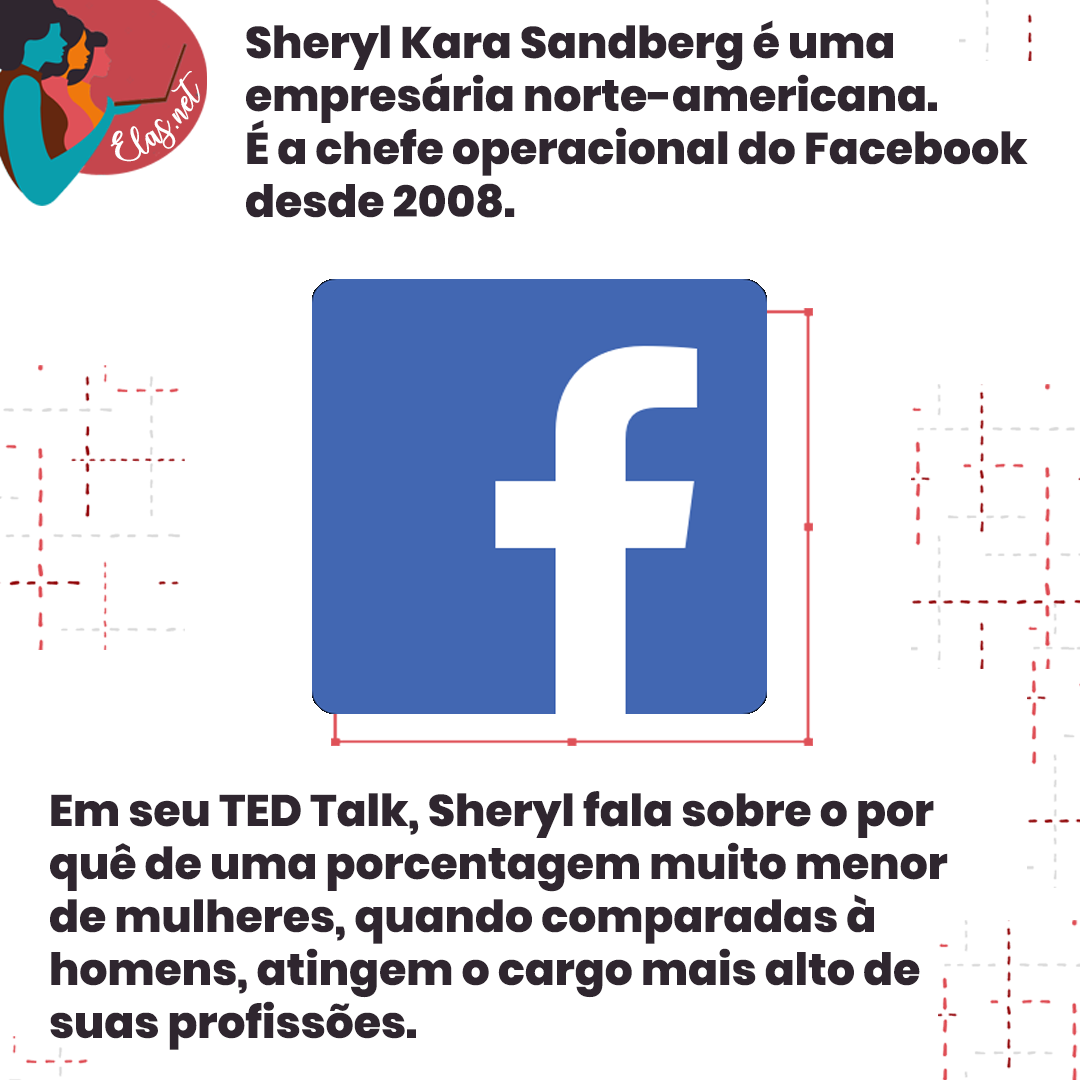
<style>
.page{position:relative;width:1080px;height:1080px;background:#ffffff}
.page>*{position:absolute;margin:0}
.t1{font:44.1px "Poppins-ExtraBold";color:#2f262f}
.t2{font:25.7px "charlinda-Regular";color:#ffffff;scale:1.18 1}
</style>
<div class="page">
<p class="t1" style="left:246px;top:20px;width:782px;height:198px">Sheryl Kara Sandberg é uma <br>empresária norte-americana. <br>É a chefe operacional do Facebook <br>desde 2008.</p>
<p class="t2" style="left:110px;top:71px;width:90px;height:91px;rotate:-43deg">Elas.net</p>
<p class="t1" style="left:50px;top:791px;width:898px;height:259px">Em seu TED Talk, Sheryl fala sobre o por <br>quê de uma porcentagem muito menor <br>de mulheres, quando comparadas à <br>homens, atingem o cargo mais alto de <br>suas profissões.</p>
</div>
